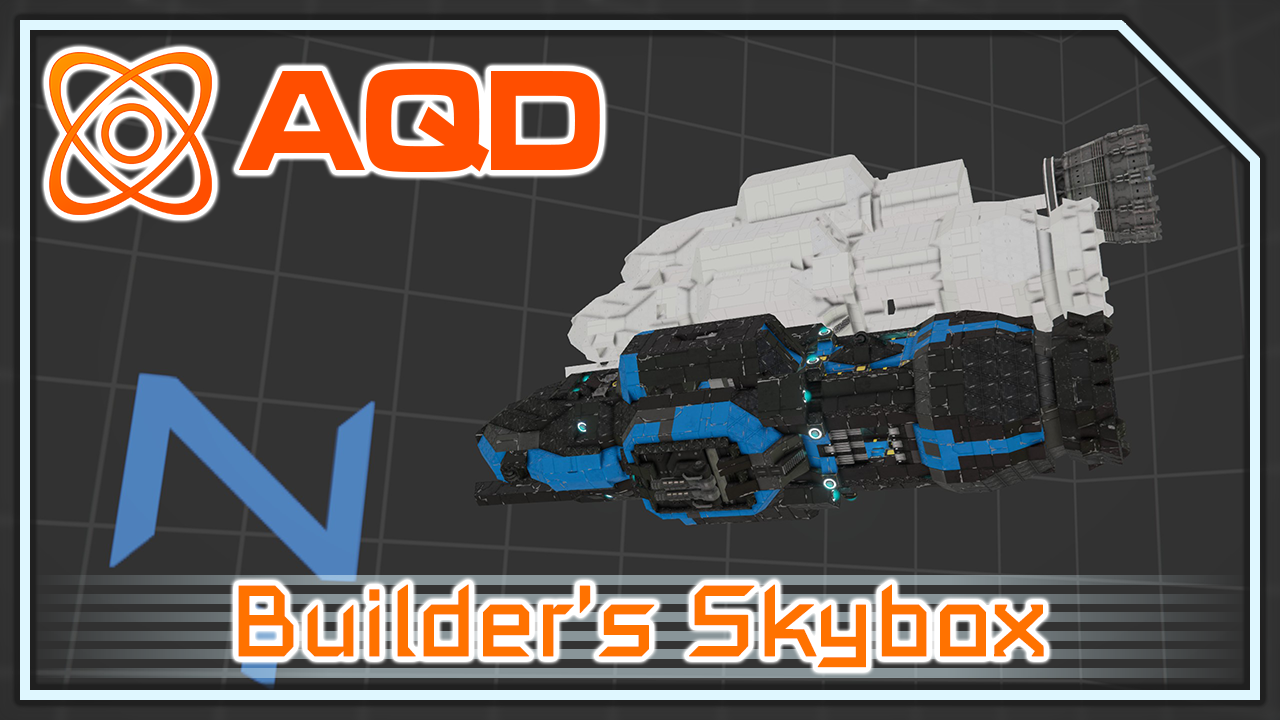
<style>
.page{position:relative;width:1280px;height:720px;background:#333333}
.page>*{position:absolute;margin:0}
.t1{font:148.7px "MicrogrammaD-BoldExte";color:#ff4e00;scale:0.83 1}
.t2{font:99px "SpaceEngineers";color:#ff7200;font-weight:bold}
</style>
<div class="page">
<p class="t1" style="left:238px;top:69px;width:362px;height:104px">AQD</p>
<p class="t2" style="left:238px;top:584px;width:806px;height:84px">Builder’s Skybox</p>
</div>
